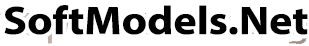
<style>
.page{position:relative;width:309px;height:46px;background:#ffffff}
.page>*{position:absolute;margin:0}
.t1{font:40px "MyriadPro-Bold";color:#000000;scale:1.1 1}
</style>
<div class="page">
<p class="t1" style="left:4px;top:5px;width:304px;height:30px">SoftModels.Net</p>
</div>
